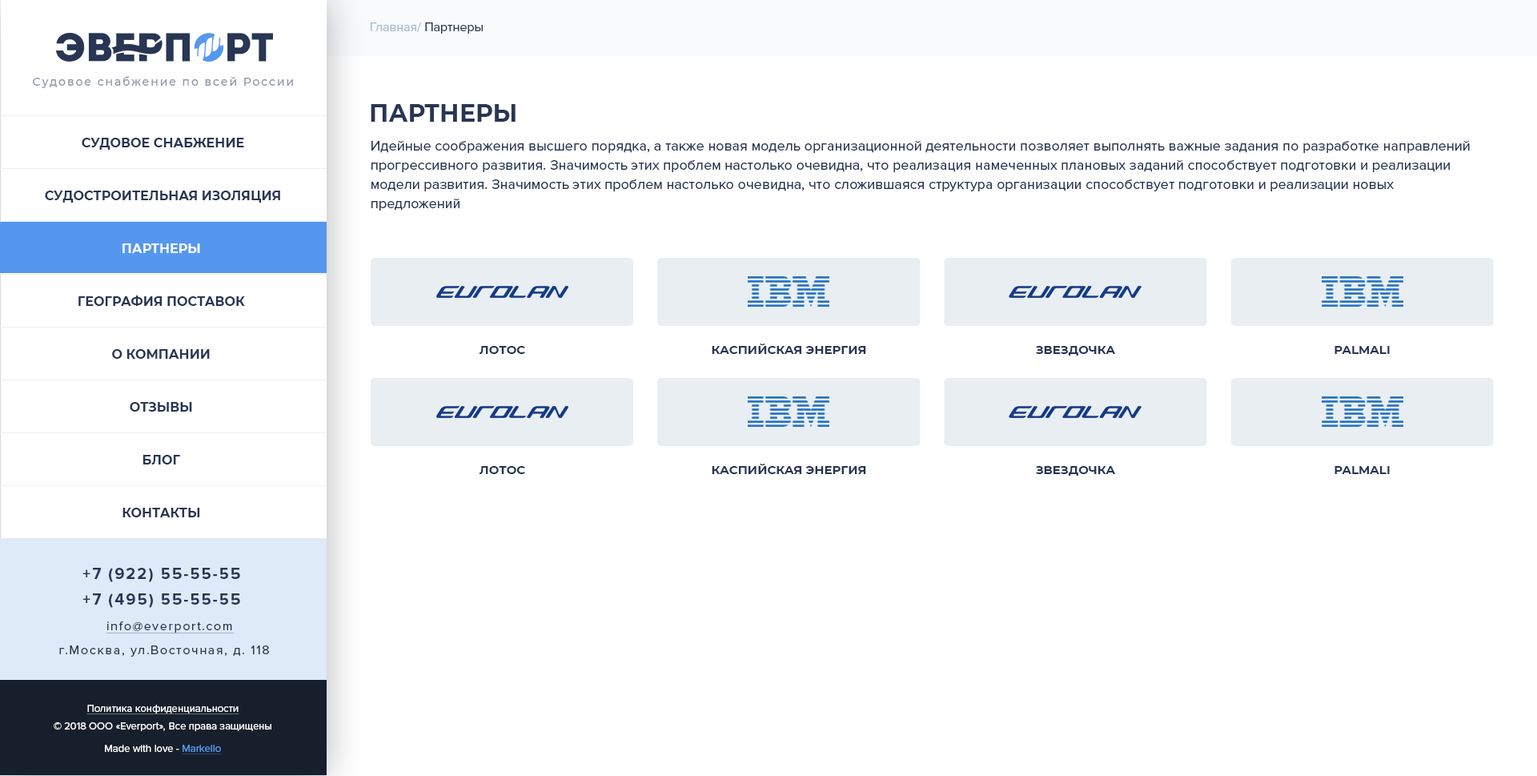
<style>
.page{position:relative;width:1537px;height:776px;background:#ffffff}
.page>*{position:absolute;margin:0}
.t1{font:12.8px "ProximaNova-Regular";color:#a6bcd4}
.t2{font:12.8px "ProximaNova-Regular";color:#283654}
.t3{font:11.2px "Montserrat-Medium";letter-spacing:0.135em;color:#8e96a8}
.t4{font:24px "Montserrat-Bold";color:#283654;text-transform:uppercase}
.t5{font:12.8px/52.8px "Montserrat-Bold";color:#283654;text-transform:uppercase}
.t6{font:12.8px/52.8px "Montserrat-Bold";color:#ffffff;text-transform:uppercase}
.t7{font:14.4px/19.2px "ProximaNova-Regular";color:#283654}
.t8{font:12px "Montserrat-Bold";color:#283654;text-transform:uppercase}
.t9{font:16px "ProximaNova-Bold";letter-spacing:0.1em;color:#283654}
.t10{font:12.8px "ProximaNova-Regular";letter-spacing:0.1em;color:#283654;text-decoration:underline}
.t11{font:12.8px "ProximaNova-Regular";letter-spacing:0.1em;color:#283654}
.t12{font:10.4px/17.6px "ProximaNova-Regular";color:#ffffff}
.t13{font:10.4px/16px "ProximaNova-Regular";color:#ffffff;text-decoration:underline}
.t14{font:10.4px "ProximaNova-Regular";color:#ffffff}
.t15{font:10.4px "ProximaNova-Regular";color:#5597ee;text-decoration:underline}
</style>
<div class="page">
<p class="t1" style="left:371px;top:22px;width:112px;height:12px">Главная/ <span class="t2">Партнеры</span></p>
<p class="t3" style="left:33px;top:76px;width:260px;height:12px">Судовое снабжение по всей России</p>
<p class="t4" style="left:371px;top:104px;width:145px;height:18px">Партнеры</p>
<p class="t5" style="left:45px;top:138px;width:235px;height:379px;text-align:center">Судовое снабжение<br> Судостроительная изоляция<br><span class="t6">Партнеры<br></span>География поставок<br>О компании<br>Отзывы<br>блог<br>контакты</p>
<p class="t7" style="left:371px;top:140px;width:1099px;height:71px">Идейные соображения высшего порядка, а также новая модель организационной деятельности позволяет выполнять важные задания по разработке направлений прогрессивного развития. Значимость этих проблем настолько очевидна, что реализация намеченных плановых заданий способствует подготовки и реализации модели развития. Значимость этих проблем настолько очевидна, что сложившаяся структура организации способствует подготовки и реализации новых предложений</p>
<p class="t8" style="left:480px;top:346px;width:45px;height:8px">ЛОТОС</p>
<p class="t8" style="left:712px;top:343px;width:154px;height:11px">Каспийская энергия</p>
<p class="t8" style="left:1036px;top:346px;width:80px;height:9px">Звездочка</p>
<p class="t8" style="left:1335px;top:346px;width:55px;height:8px">PALMALI</p>
<p class="t8" style="left:480px;top:466px;width:45px;height:8px">ЛОТОС</p>
<p class="t8" style="left:712px;top:464px;width:154px;height:10px">Каспийская энергия</p>
<p class="t8" style="left:1036px;top:466px;width:80px;height:10px">Звездочка</p>
<p class="t8" style="left:1335px;top:466px;width:55px;height:8px">PALMALI</p>
<p class="t9" style="left:82px;top:568px;width:158px;height:14px">+7 (922) 55-55-55</p>
<p class="t9" style="left:82px;top:593px;width:158px;height:15px">+7 (495) 55-55-55</p>
<p class="t10" style="left:106px;top:621px;width:129px;height:12px">info@everport.com</p>
<p class="t11" style="left:59px;top:645px;width:210px;height:11px">г.Москва, ул.Восточная, д. 118</p>
<p class="t12" style="left:54px;top:705px;width:217px;height:26px;text-align:center"><span class="t13">Политика конфиденциальности<br></span>© 2018 ООО «Everport», Все права защищены</p>
<p class="t14" style="left:105px;top:745px;width:117px;height:9px">Made with love - <span class="t15">Markello</span></p>
</div>
